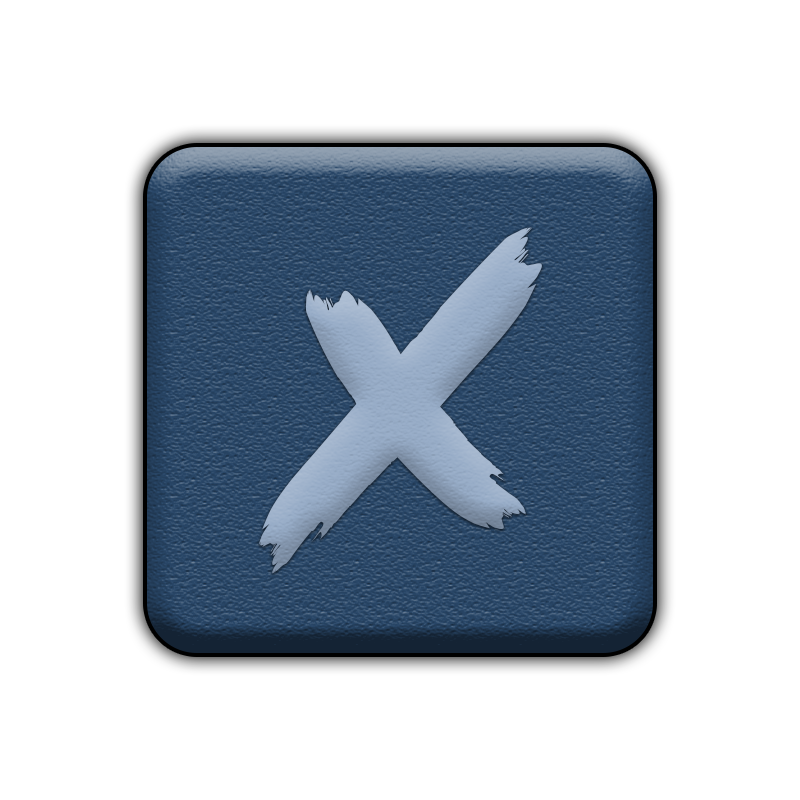
<style>
.page{position:relative;width:800px;height:800px;background:#ffffff}
.page>*{position:absolute;margin:0}
.t1{font:522.2px "PinkBlue";color:#97acc7}
</style>
<div class="page">
<p class="t1" style="left:259px;top:227px;width:283px;height:347px">x</p>
</div>
